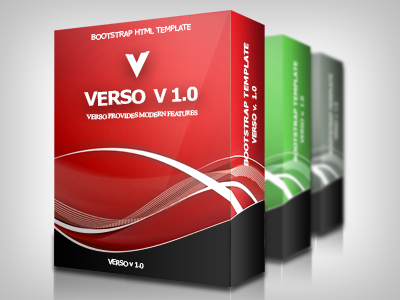
<style>
.page{position:relative;width:400px;height:300px}
.page>*{position:absolute;margin:0}
.t1{font:7.5px "Tahoma";letter-spacing:-0.01em;color:#ffffff}
.t2{font:5.7px "Tahoma-Bold";letter-spacing:-0.01em;color:#ffffff;text-transform:uppercase;font-style:italic;scale:1.9 1}
.t3{font:18.9px "Tahoma-Bold";letter-spacing:-0.05em;color:#ffffff}
.t4{font:5.1px "Tahoma";letter-spacing:-0.01em;color:#ffffff;font-weight:bold;font-style:italic;scale:1.9 1}
.t5{font:6.6px "TimesNewRomanPSMT";letter-spacing:-0.05em;color:#ffffff}
.t6{font:6.9px "Tahoma";letter-spacing:-0.05em;color:#ffffff}
</style>
<div class="page">
<p class="t1" style="left:91px;top:23px;width:100px;height:17px;rotate:-6deg">BOOTSTRAP HTML TEMPLATE</p>
<p class="t2" style="left:243px;top:42px;width:6px;height:125px;rotate:-90deg">BOOTSTRAP TEMPLATE</p>
<p class="t3" style="left:84px;top:86px;width:114px;height:20px;rotate:-3deg">VERSO  V 1.0</p>
<p class="t4" style="left:252px;top:86px;width:5px;height:58px;rotate:-90deg">VERSO v. 1.0</p>
<p class="t5" style="left:86px;top:110px;width:112px;height:10px;rotate:-2deg">VERSO PROVIDES MODERN FEATURES</p>
<p class="t6" style="left:108px;top:258px;width:36px;height:11px;rotate:7deg">VERSO v 1.0</p>
</div>
